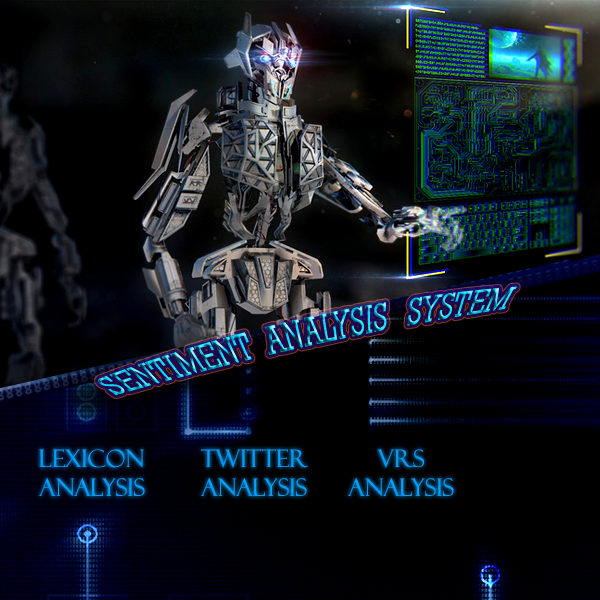
<style>
.page{position:relative;width:600px;height:600px;background:#000000}
.page>*{position:absolute;margin:0}
.t1{font:26.7px "Rockwell"}
.t2{font:24px "FelixTitlingMT";color:#009bf5}
</style>
<div class="page">
<p class="t1" style="left:98px;top:286px;width:419px;height:110px;rotate:-13deg">SENTIMENT  ANALYSIS   SYSTEM</p>
<p class="t2" style="left:39px;top:449px;width:106px;height:48px">LEXICON<br>ANALYSIS</p>
<p class="t2" style="left:201px;top:449px;width:107px;height:48px">TWITTER <br>ANALYSIS</p>
<p class="t2" style="left:348px;top:449px;width:106px;height:48px;text-align:center">vrs<br>analysis</p>
</div>
